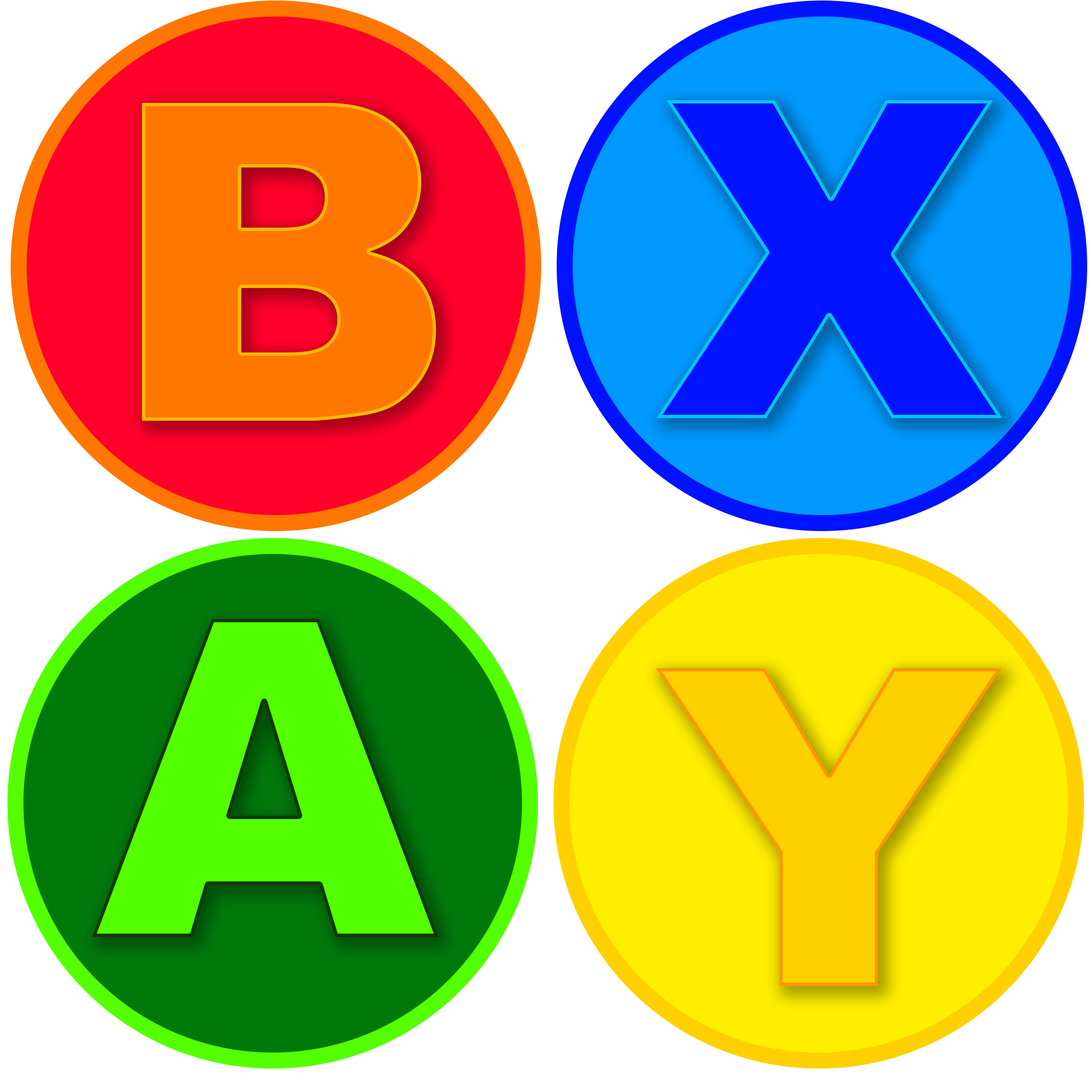
<style>
.page{position:relative;width:1092px;height:1092px;background:#ffffff}
.page>*{position:absolute;margin:0}
.t1{font:444.3px "Arial-Black";color:#0012ff}
.t2{font:444.3px "Arial-Black";color:#ff7700}
.t3{font:444.3px "Arial-Black";color:#54ff00}
.t4{font:444.3px "Arial-Black";color:#ffd000}
</style>
<div class="page">
<p class="t1" style="left:656px;top:100px;width:346px;height:318px">X</p>
<p class="t2" style="left:142px;top:103px;width:294px;height:318px">B</p>
<p class="t3" style="left:92px;top:619px;width:347px;height:318px">A</p>
<p class="t4" style="left:655px;top:668px;width:347px;height:318px">Y</p>
</div>
